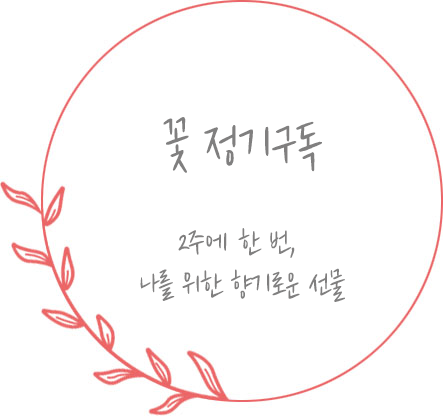
<style>
.page{position:relative;width:443px;height:417px;background:#ffffff}
.page>*{position:absolute;margin:0}
.t1{font:56.3px "Cafe24Shiningstar";letter-spacing:-0.025em;color:#807f7f}
.t2{font:34.8px/42.4px "Cafe24Shiningstar";letter-spacing:-0.025em;color:#807f7f}
</style>
<div class="page">
<p class="t1" style="left:163px;top:117px;width:159px;height:56px">꽃 정기구독</p>
<p class="t2" style="left:140px;top:228px;width:205px;height:74px;text-align:center">2주에 한 번, <br>나를 위한 향기로운 선물</p>
</div>
